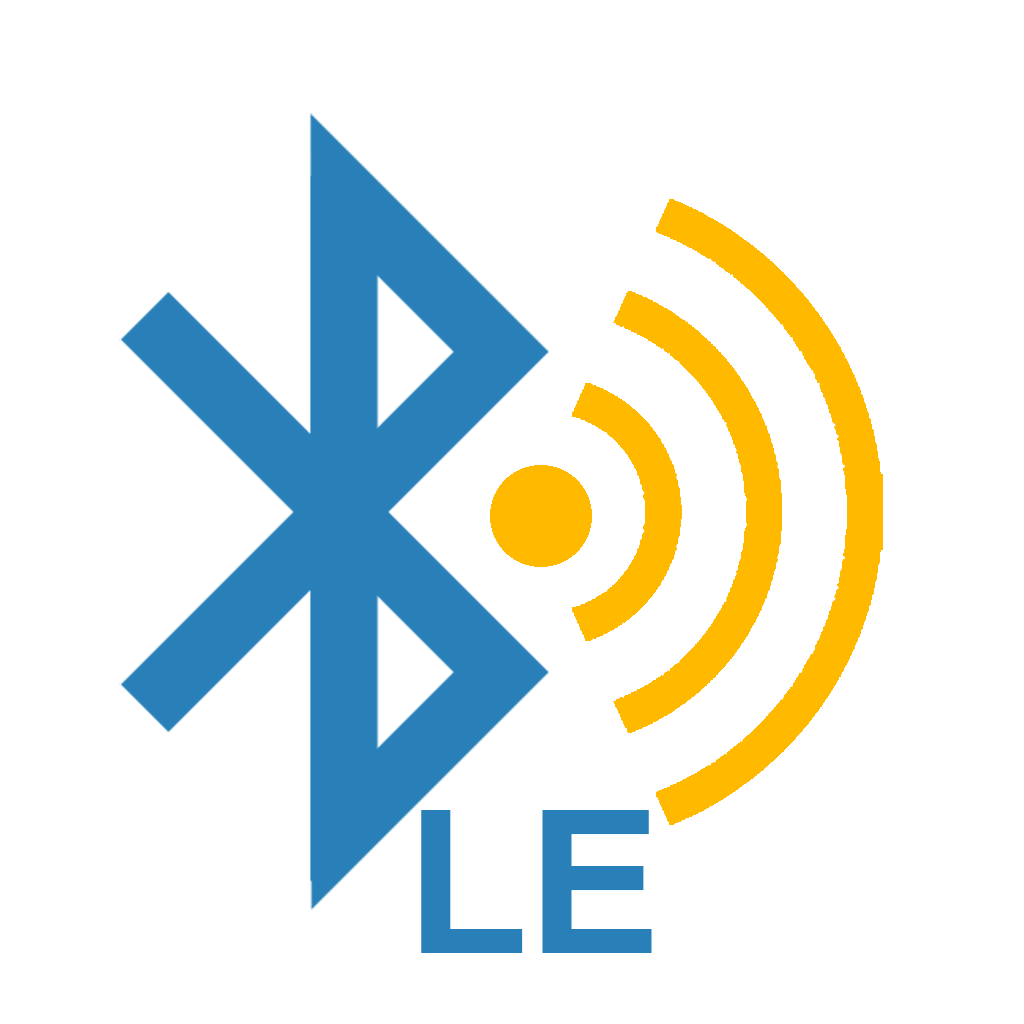
<style>
.page{position:relative;width:1024px;height:1024px;background:#ffffff}
.page>*{position:absolute;margin:0}
.t1{font:200px "Arial-BoldMT";color:#2980b9}
</style>
<div class="page">
<p class="t1" style="left:421px;top:810px;width:231px;height:143px">LE</p>
</div>
